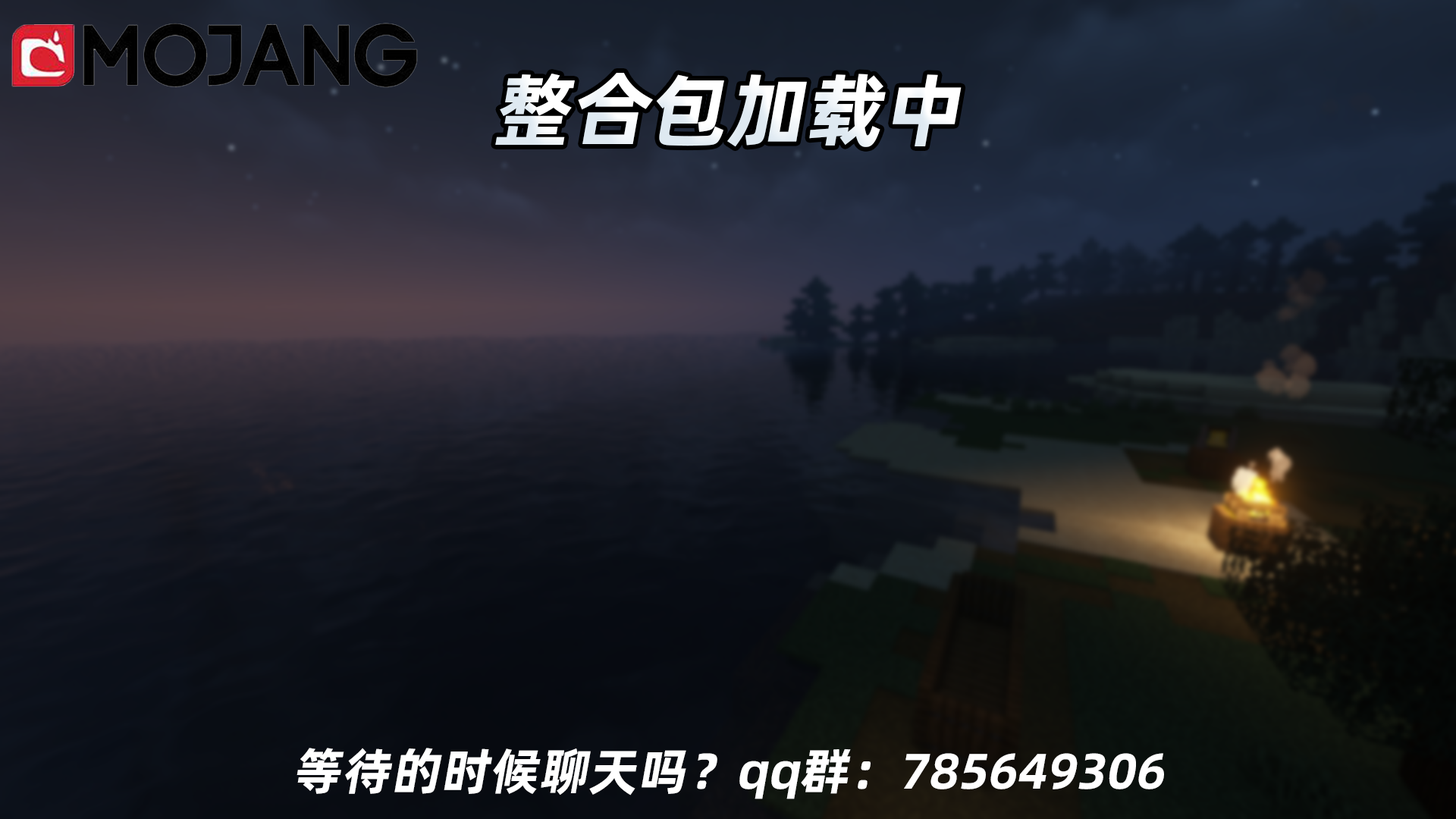
<style>
.page{position:relative;width:1456px;height:819px}
.page>*{position:absolute;margin:0}
.t1{font:79.4px "AlibabaPuHuiTi-Bold";color:#ffffff;font-style:italic}
.t2{font:50px "AlibabaPuHuiTi-Bold";color:#ffffff;font-style:italic}
</style>
<div class="page">
<p class="t1" style="left:495px;top:73px;width:467px;height:74px">整合包加载中</p>
<p class="t2" style="left:297px;top:748px;width:867px;height:51px">等待的时候聊天吗？qq群：785649306</p>
</div>
